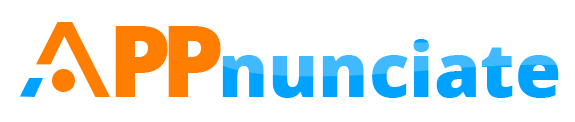
<style>
.page{position:relative;width:575px;height:122px;background:#ffffff}
.page>*{position:absolute;margin:0}
.t1{font:100px "OpenSans-ExtraBold";letter-spacing:-0.1em;color:#ff7e00}
.t2{font:75px "OpenSans-ExtraBold";color:#00a2ff}
</style>
<div class="page">
<p class="t1" style="left:115px;top:26px;width:106px;height:71px">PP</p>
<p class="t2" style="left:222px;top:39px;width:337px;height:59px">nunciate</p>
</div>
